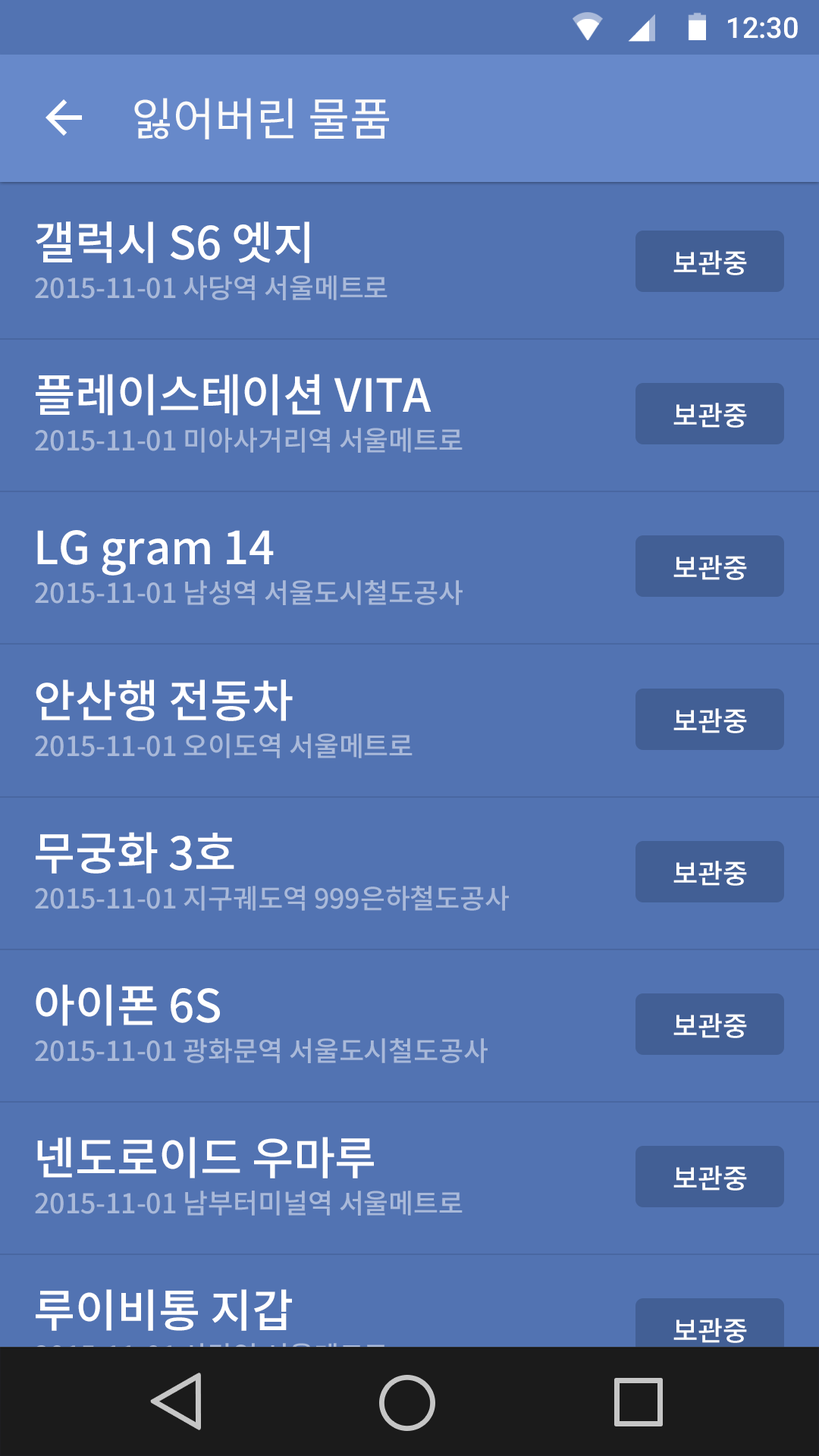
<style>
.page{position:relative;width:819px;height:1456px;background:#5273b2}
.page>*{position:absolute;margin:0}
.t1{font:28.8px "Roboto-Medium";color:#ffffff}
.t2{font:45.5px "NotoSansCJKkr-Regular";letter-spacing:-0.005em;color:#fafafa}
.t3{font:45.5px "NotoSansCJKkr-Medium";letter-spacing:-0.005em;color:#ffffff}
.t4{font:27.3px "NotoSansCJKkr-Medium";letter-spacing:-0.005em;color:#ffffff}
.t5{font:27.3px "NotoSansCJKkr-Medium";letter-spacing:-0.005em;color:#a9b9d9}
</style>
<div class="page">
<p class="t1" style="left:728px;top:17px;width:70px;height:22px">12:30</p>
<p class="t2" style="left:134px;top:98px;width:255px;height:42px">잃어버린 물품</p>
<p class="t3" style="left:36px;top:221px;width:273px;height:42px">갤럭시 S6 엣지</p>
<p class="t4" style="left:673px;top:250px;width:74px;height:25px">보관중</p>
<p class="t5" style="left:35px;top:275px;width:353px;height:25px">2015-11-01 사당역 서울메트로</p>
<p class="t3" style="left:36px;top:374px;width:395px;height:42px">플레이스테이션 VITA</p>
<p class="t4" style="left:673px;top:403px;width:74px;height:25px">보관중</p>
<p class="t5" style="left:35px;top:428px;width:428px;height:25px">2015-11-01 미아사거리역 서울메트로</p>
<p class="t3" style="left:37px;top:530px;width:237px;height:46px">LG gram 14</p>
<p class="t4" style="left:673px;top:555px;width:74px;height:25px">보관중</p>
<p class="t5" style="left:35px;top:580px;width:428px;height:25px">2015-11-01 남성역 서울도시철도공사</p>
<p class="t3" style="left:36px;top:679px;width:257px;height:42px">안산행 전동차</p>
<p class="t4" style="left:673px;top:708px;width:74px;height:25px">보관중</p>
<p class="t5" style="left:35px;top:733px;width:378px;height:25px">2015-11-01 오이도역 서울메트로</p>
<p class="t3" style="left:36px;top:832px;width:198px;height:42px">무궁화 3호</p>
<p class="t4" style="left:673px;top:861px;width:74px;height:25px">보관중</p>
<p class="t5" style="left:35px;top:886px;width:474px;height:25px">2015-11-01 지구궤도역 999은하철도공사</p>
<p class="t3" style="left:36px;top:984px;width:184px;height:42px">아이폰 6S</p>
<p class="t4" style="left:673px;top:1013px;width:74px;height:25px">보관중</p>
<p class="t5" style="left:35px;top:1038px;width:453px;height:25px">2015-11-01 광화문역 서울도시철도공사</p>
<p class="t3" style="left:37px;top:1137px;width:337px;height:41px">넨도로이드 우마루</p>
<p class="t4" style="left:673px;top:1166px;width:74px;height:25px">보관중</p>
<p class="t5" style="left:35px;top:1191px;width:428px;height:25px">2015-11-01 남부터미널역 서울메트로</p>
<p class="t3" style="left:36px;top:1289px;width:256px;height:42px">루이비통 지갑</p>
<p class="t4" style="left:673px;top:1318px;width:74px;height:25px">보관중</p>
</div>
